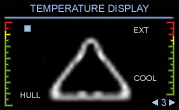
<style>
.page{position:relative;width:179px;height:110px;background:#000000}
.page>*{position:absolute;margin:0}
.t1{font:10px "ArialMT";color:#a2beff;font-variant:small-caps}
.t2{font:8px "ArialMT";font-variant:small-caps}
.t3{font:8px "ArialMT";color:#e6e3e3;font-variant:small-caps}
</style>
<div class="page">
<p class="t1" style="left:30px;top:4px;width:119px;height:8px">TEMPERATURE DISPLAY</p>
<p class="t2" style="left:134px;top:27px;width:15px;height:6px">EXT</p>
<p class="t3" style="left:134px;top:75px;width:23px;height:6px">COOL</p>
<p class="t2" style="left:20px;top:92px;width:21px;height:6px">HULL</p>
</div>
